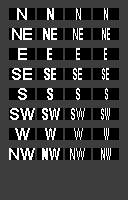
<style>
.page{position:relative;width:128px;height:200px;background:#3d3d3d}
.page>*{position:absolute;margin:0}
.t1{font:16px "Arial-BoldMT";color:#ffffff}
.t2{font:16px "Arial-BoldMT";color:#ffffff;scale:0.73 1}
.t3{font:16px "Arial-BoldMT";color:#ffffff;scale:0.57 1}
.t4{font:16px "Arial-BoldMT";color:#ffffff;scale:0.3 1}
.t5{font:16px "Arial-BoldMT";letter-spacing:-0.035em;color:#ffffff;scale:0.72 1}
.t6{font:16px "Arial-BoldMT";letter-spacing:0.3em;color:#ffffff;scale:0.3 1}
.t7{font:16px "Arial-BoldMT";color:#ffffff;scale:0.7 1}
.t8{font:16px "Arial-BoldMT";letter-spacing:-0.075em;color:#ffffff;scale:0.57 1}
.t9{font:16px "Arial-BoldMT";letter-spacing:0.16em;color:#ffffff;scale:0.42 1}
.t10{font:16px "Arial-BoldMT";letter-spacing:0.16em;color:#ffffff;scale:0.3 1}
.t11{font:16px "Arial-BoldMT";color:#ffffff;scale:0.42 1}
.t12{font:16px "Arial-BoldMT";letter-spacing:0.025em;color:#ffffff;scale:0.7 1}
.t13{font:16px "Arial-BoldMT";letter-spacing:-0.01em;color:#ffffff;scale:0.57 1}
.t14{font:16px "Arial-BoldMT";letter-spacing:0.05em;color:#ffffff;scale:0.42 1}
.t15{font:16px "Arial-BoldMT";letter-spacing:0.05em;color:#ffffff;scale:0.3 1}
.t16{font:16px "Arial-BoldMT";letter-spacing:0.025em;color:#ffffff}
</style>
<div class="page">
<p class="t1" style="left:17px;top:8px;width:10px;height:12px">N</p>
<p class="t2" style="left:47px;top:8px;width:7px;height:12px">N</p>
<p class="t3" style="left:76px;top:8px;width:5px;height:12px">N</p>
<p class="t4" style="left:104px;top:8px;width:4px;height:12px">N</p>
<p class="t1" style="left:12px;top:28px;width:20px;height:12px">NE</p>
<p class="t5" style="left:43px;top:28px;width:14px;height:12px">NE</p>
<p class="t3" style="left:73px;top:28px;width:10px;height:12px">NE</p>
<p class="t6" style="left:102px;top:28px;width:8px;height:12px">NE</p>
<p class="t1" style="left:18px;top:48px;width:9px;height:12px">E</p>
<p class="t7" style="left:47px;top:48px;width:5px;height:12px">E</p>
<p class="t3" style="left:76px;top:48px;width:4px;height:12px">E</p>
<p class="t4" style="left:104px;top:48px;width:3px;height:12px">E</p>
<p class="t1" style="left:12px;top:68px;width:20px;height:12px">SE</p>
<p class="t7" style="left:44px;top:68px;width:12px;height:12px">SE</p>
<p class="t8" style="left:73px;top:68px;width:9px;height:12px">SE</p>
<p class="t9" style="left:102px;top:68px;width:7px;height:12px">S<span class="t10">E</span></p>
<p class="t1" style="left:18px;top:88px;width:9px;height:12px">S</p>
<p class="t7" style="left:47px;top:88px;width:6px;height:12px">S</p>
<p class="t3" style="left:76px;top:88px;width:4px;height:12px">S</p>
<p class="t11" style="left:105px;top:88px;width:3px;height:12px">S</p>
<p class="t1" style="left:10px;top:108px;width:25px;height:12px">SW</p>
<p class="t12" style="left:42px;top:108px;width:18px;height:12px">SW</p>
<p class="t13" style="left:71px;top:108px;width:14px;height:12px">SW</p>
<p class="t14" style="left:101px;top:108px;width:9px;height:12px">S<span class="t15">W</span></p>
<p class="t1" style="left:15px;top:128px;width:15px;height:12px">W</p>
<p class="t7" style="left:45px;top:128px;width:11px;height:12px">W</p>
<p class="t3" style="left:74px;top:128px;width:9px;height:12px">W</p>
<p class="t4" style="left:104px;top:128px;width:5px;height:12px">W</p>
<p class="t16" style="left:9px;top:148px;width:26px;height:12px">NW</p>
<p class="t12" style="left:42px;top:148px;width:18px;height:12px">NW</p>
<p class="t13" style="left:70px;top:148px;width:15px;height:12px">NW</p>
<p class="t6" style="left:101px;top:148px;width:10px;height:12px">NW</p>
</div>
